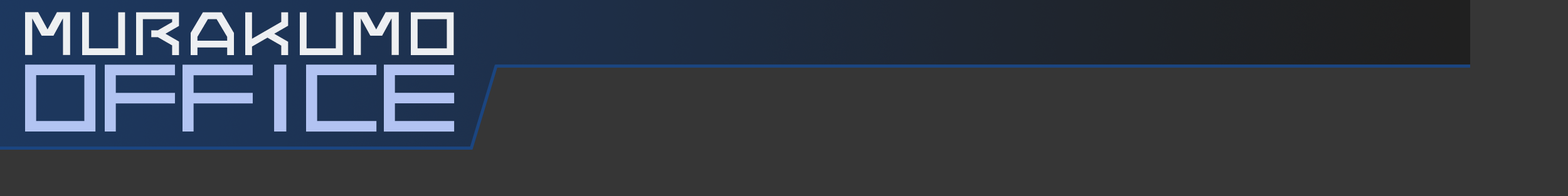
<style>
.page{position:relative;width:1568px;height:196px;background:#363636}
.page>*{position:absolute;margin:0}
.t1{font:48.9px "7THDR2020Regular";letter-spacing:0.1em;color:#fcfeff}
.t2{font:48.9px "7THDR2020Regular";letter-spacing:0.1em;color:#fcfeff;scale:1.05 1}
.t3{font:48.9px "7THDR2020Regular";letter-spacing:0.095em;color:#fcfeff}
.t4{font:48.9px "7THDR2020Regular";letter-spacing:0.095em;color:#fcfeff;scale:1.05 1}
.t5{font:76.5px "7THDR2020Regular";letter-spacing:-0.11em;color:#bdcfff;scale:1.05 1}
.t6{font:76.5px "7THDR2020Regular";letter-spacing:-0.02em;color:#bdcfff;scale:1.05 1}
.t7{font:76.5px "7THDR2020Regular";letter-spacing:-0.04em;color:#bdcfff;scale:1.05 1}
</style>
<div class="page">
<p class="t1" style="left:25px;top:12px;width:429px;height:43px;opacity:0.9"><span class="t2">M</span>URAK<span class="t3">U</span><span class="t4">M</span>O</p>
<p class="t5" style="left:25px;top:65px;width:430px;height:67px;opacity:0.9"><span class="t6">O</span><span class="t7">F</span>FI<span class="t7">CE</span></p>
</div>
